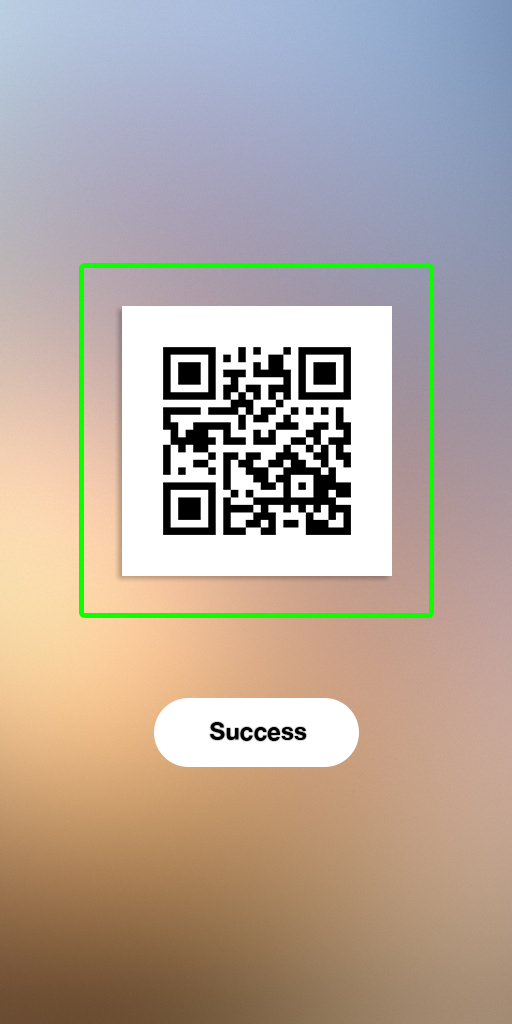
<style>
.page{position:relative;width:512px;height:1024px}
.page>*{position:absolute;margin:0}
.t1{font:24px "HelveticaNeue-Bold";color:#000000}
</style>
<div class="page">
<p class="t1" style="left:210px;top:722px;width:97px;height:19px">Success</p>
</div>
